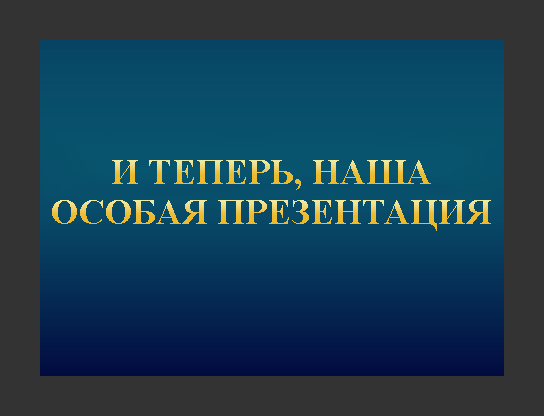
<style>
.page{position:relative;width:544px;height:416px;background:#333333}
.page>*{position:absolute;margin:0}
.t1{font:36px "TimesNewRomanPS-BoldMT"}
</style>
<div class="page">
<p class="t1" style="left:112px;top:160px;width:319px;height:30px">И ТЕПЕРЬ, НАША</p>
<p class="t1" style="left:52px;top:200px;width:439px;height:31px">ОСОБАЯ ПРЕЗЕНТАЦИЯ</p>
</div>
